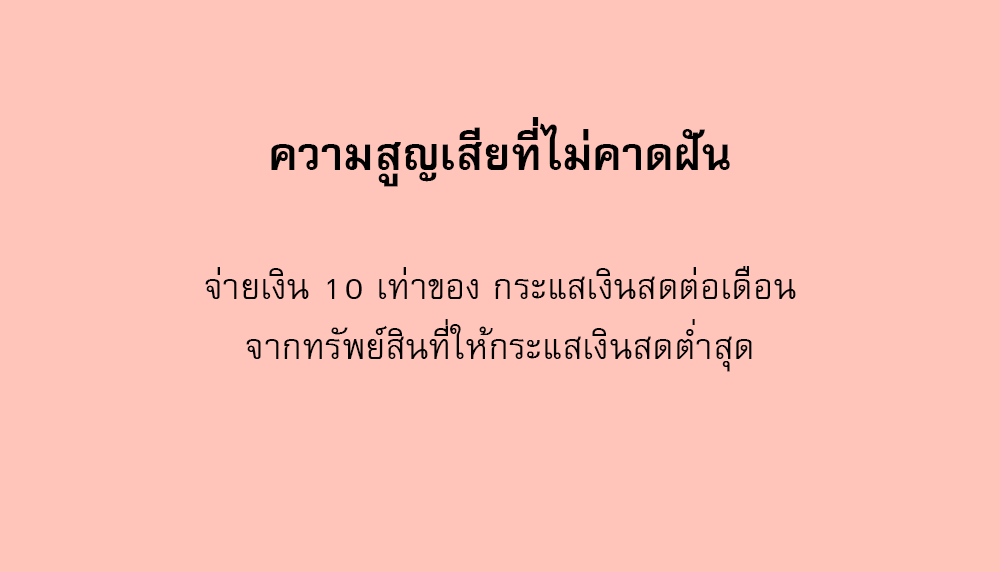
<style>
.page{position:relative;width:1000px;height:572px;background:#ffc4ba}
.page>*{position:absolute;margin:0}
.t1{font:64px "FreesiaUPCBold";color:#000000}
.t2{font:50px/60px "FreesiaUPC";color:#000000}
</style>
<div class="page">
<p class="t1" style="left:271px;top:117px;width:459px;height:70px">ความสูญเสียที่ไม่คาดฝัน</p>
<p class="t2" style="left:205px;top:266px;width:591px;height:106px;text-align:center">จ่ายเงิน 10 เท่าของ กระแสเงินสดต่อเดือน<br>จากทรัพย์สินที่ให้กระแสเงินสดต่ำสุด</p>
</div>
